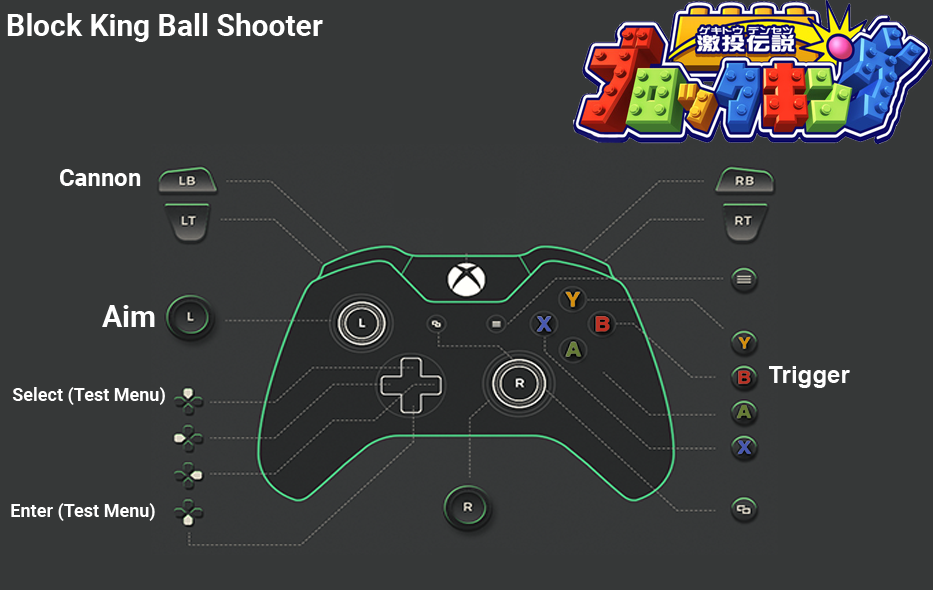
<style>
.page{position:relative;width:933px;height:590px;background:#363838}
.page>*{position:absolute;margin:0}
.t1{font:30px "Roboto-Bold";color:#ffffff}
.t2{font:24px "Roboto-Bold";color:#ffffff}
.t3{font:30px "Roboto-Bold";color:#fefefe}
.t4{font:24px "Arial-BoldMT";color:#fefefe}
.t5{font:18px "Roboto-Bold";color:#ffffff}
</style>
<div class="page">
<p class="t1" style="left:7px;top:13px;width:316px;height:29px">Block King Ball Shooter</p>
<p class="t2" style="left:60px;top:169px;width:81px;height:17px">Cannon</p>
<p class="t3" style="left:102px;top:305px;width:53px;height:22px">Aim</p>
<p class="t4" style="left:769px;top:366px;width:81px;height:22px">Trigger</p>
<p class="t5" style="left:12px;top:387px;width:153px;height:18px">Select (Test Menu)</p>
<p class="t5" style="left:11px;top:503px;width:144px;height:18px">Enter (Test Menu)</p>
</div>
